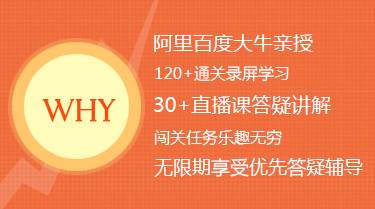
<style>
.page{position:relative;width:375px;height:209px}
.page>*{position:absolute;margin:0}
.t1{font:20px "MicrosoftYaHei";color:#ffffff}
.t2{font:16px "MicrosoftYaHei";color:#ffffff}
.t3{font:30px "FelixTitlingMT";color:#ff4a0d;font-weight:bold}
.t4{font:19px "MicrosoftYaHei";color:#ffffff}
</style>
<div class="page">
<p class="t1" style="left:154px;top:34px;width:159px;height:18px">阿里百度大牛亲授</p>
<p class="t2" style="left:155px;top:65px;width:134px;height:17px">120+通关录屏学习</p>
<p class="t3" style="left:42px;top:99px;width:74px;height:23px">Why</p>
<p class="t1" style="left:154px;top:95px;width:177px;height:20px">30+直播课答疑讲解</p>
<p class="t2" style="left:154px;top:129px;width:128px;height:17px">闯关任务乐趣无穷</p>
<p class="t4" style="left:154px;top:157px;width:209px;height:20px">无限期享受优先答疑辅导</p>
</div>
